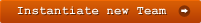
<style>
.page{position:relative;width:201px;height:23px}
.page>*{position:absolute;margin:0}
.t1{font:12px "CourierNewPS-BoldMT";letter-spacing:0.025em;color:#ffffff}
</style>
<div class="page">
<p class="t1" style="left:17px;top:6px;width:150px;height:9px">Instantiate new Team</p>
</div>
